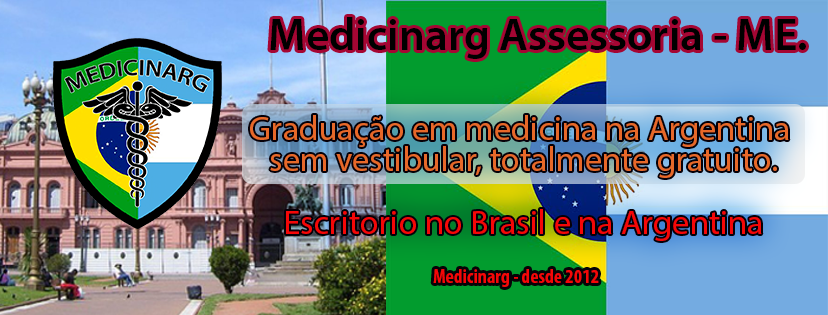
<style>
.page{position:relative;width:828px;height:315px}
.page>*{position:absolute;margin:0}
.t1{font:45.4px "MyriadPro-Semibold";color:#000000}
.t2{font:34px/31.2px "MyriadPro-Regular";letter-spacing:0.005em;color:#e76829}
.t3{font:34px/31.2px "MyriadPro-Regular";letter-spacing:0.005em;color:#f50707}
.t4{font:19.8px "MyriadPro-BoldCond";color:#f50707}
</style>
<div class="page">
<p class="t1" style="left:270px;top:17px;width:536px;height:42px">Medicinarg Assessoria - ME.</p>
<p class="t2" style="left:250px;top:115px;width:539px;height:126px;text-align:center">Graduação em medicina na Argentina <br>sem vestibular, totalmente gratuito.<br><span class="t3"><br>Escritorio no Brasil e na Argentina</span></p>
<p class="t4" style="left:433px;top:269px;width:166px;height:18px">Medicinarg - desde 2012</p>
</div>
